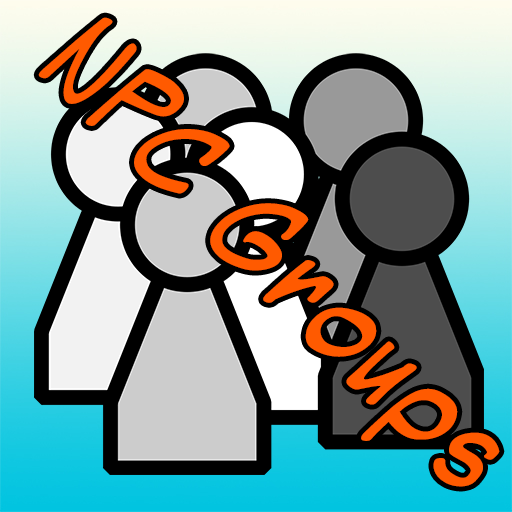
<style>
.page{position:relative;width:512px;height:512px}
.page>*{position:absolute;margin:0}
.t1{font:111.8px "MightyZeo20";color:#ff5a00}
</style>
<div class="page">
<p class="t1" style="left:38px;top:17px;width:462px;height:470px;rotate:45deg">NPC Groups</p>
</div>
